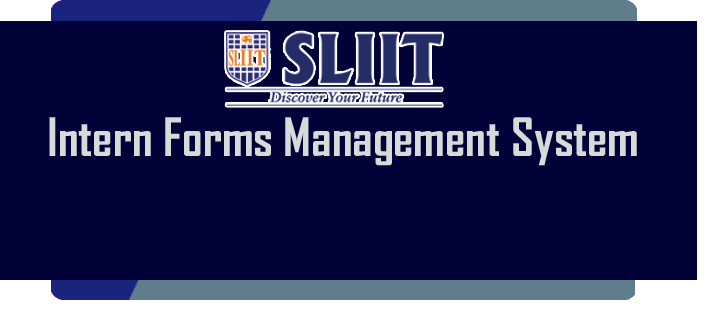
<style>
.page{position:relative;width:716px;height:310px;background:#010338}
.page>*{position:absolute;margin:0}
.t1{font:50.7px "AgencyFB-Bold";color:#d8d9d9}
</style>
<div class="page">
<p class="t1" style="left:49px;top:117px;width:588px;height:49px">Intern Forms Management System</p>
</div>
